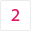
<style>
.page{position:relative;width:31px;height:31px;background:#ffffff}
.page>*{position:absolute;margin:0}
.t1{font:18px "MyriadPro-Regular";color:#e51464}
</style>
<div class="page">
<p class="t1" style="left:11px;top:9px;width:9px;height:12px">2</p>
</div>
